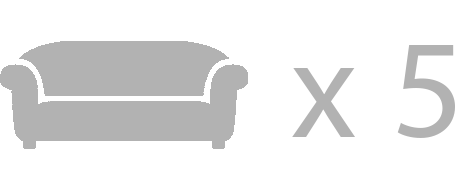
<style>
.page{position:relative;width:457px;height:190px;background:#ffffff}
.page>*{position:absolute;margin:0}
.t1{font:141.9px "MyriadPro-Regular";letter-spacing:0.02em;color:#b2b2b2}
</style>
<div class="page">
<p class="t1" style="left:292px;top:45px;width:163px;height:93px">x 5</p>
</div>
